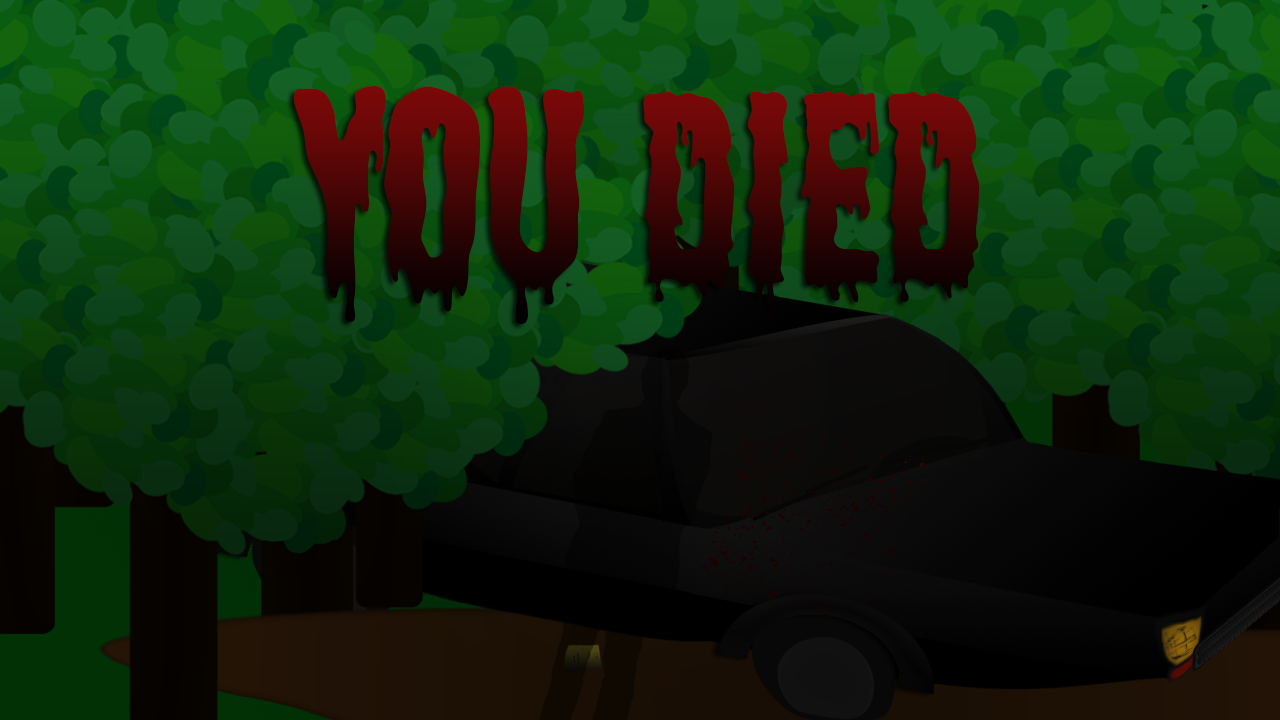
<style>
.page{position:relative;width:1280px;height:720px}
.page>*{position:absolute;margin:0}
.t1{font:274.7px "Shlop-Regular";scale:0.93 1}
</style>
<div class="page">
<p class="t1" style="left:293px;top:85px;width:687px;height:239px">you died</p>
</div>
